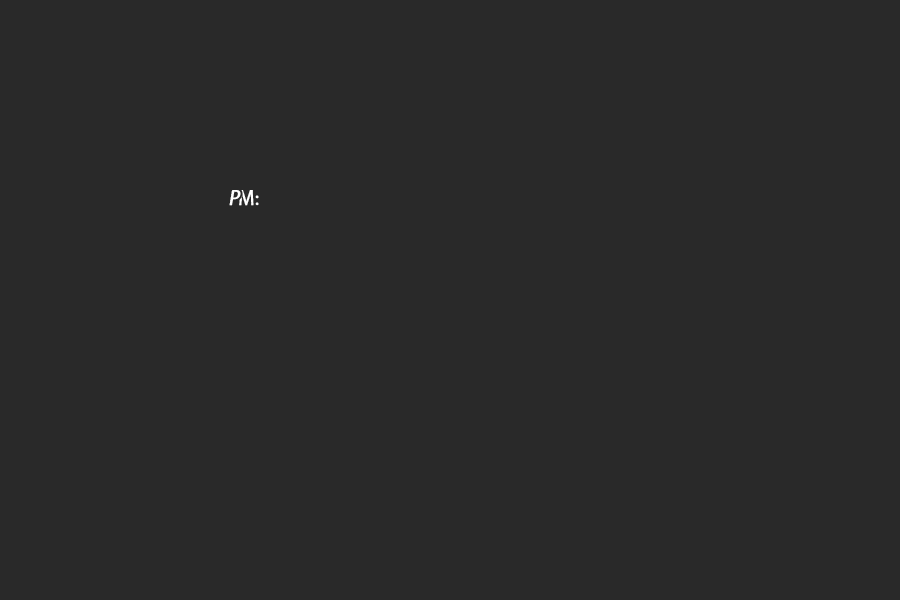
<style>
.page{position:relative;width:900px;height:600px;background:#292929}
.page>*{position:absolute;margin:0}
.t1{font:21px "MyriadPro-Regular";color:#fefefe;font-weight:bold;font-style:italic;scale:0.95 1}
.t2{font:21px "MyriadPro-Regular";color:#fefefe;font-weight:bold;scale:0.95 1}
</style>
<div class="page">
<p class="t1" style="left:229px;top:190px;width:12px;height:16px">P</p>
<p class="t2" style="left:239px;top:190px;width:20px;height:16px">M:</p>
</div>
